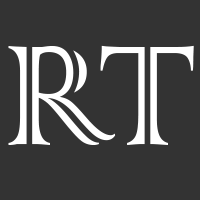
<style>
.page{position:relative;width:200px;height:200px;background:#333333}
.page>*{position:absolute;margin:0}
.t1{font:189.1px "ColonnaMT";color:#ffffff;scale:0.85 1}
</style>
<div class="page">
<p class="t1" style="left:8px;top:45px;width:186px;height:100px">RT</p>
</div>
